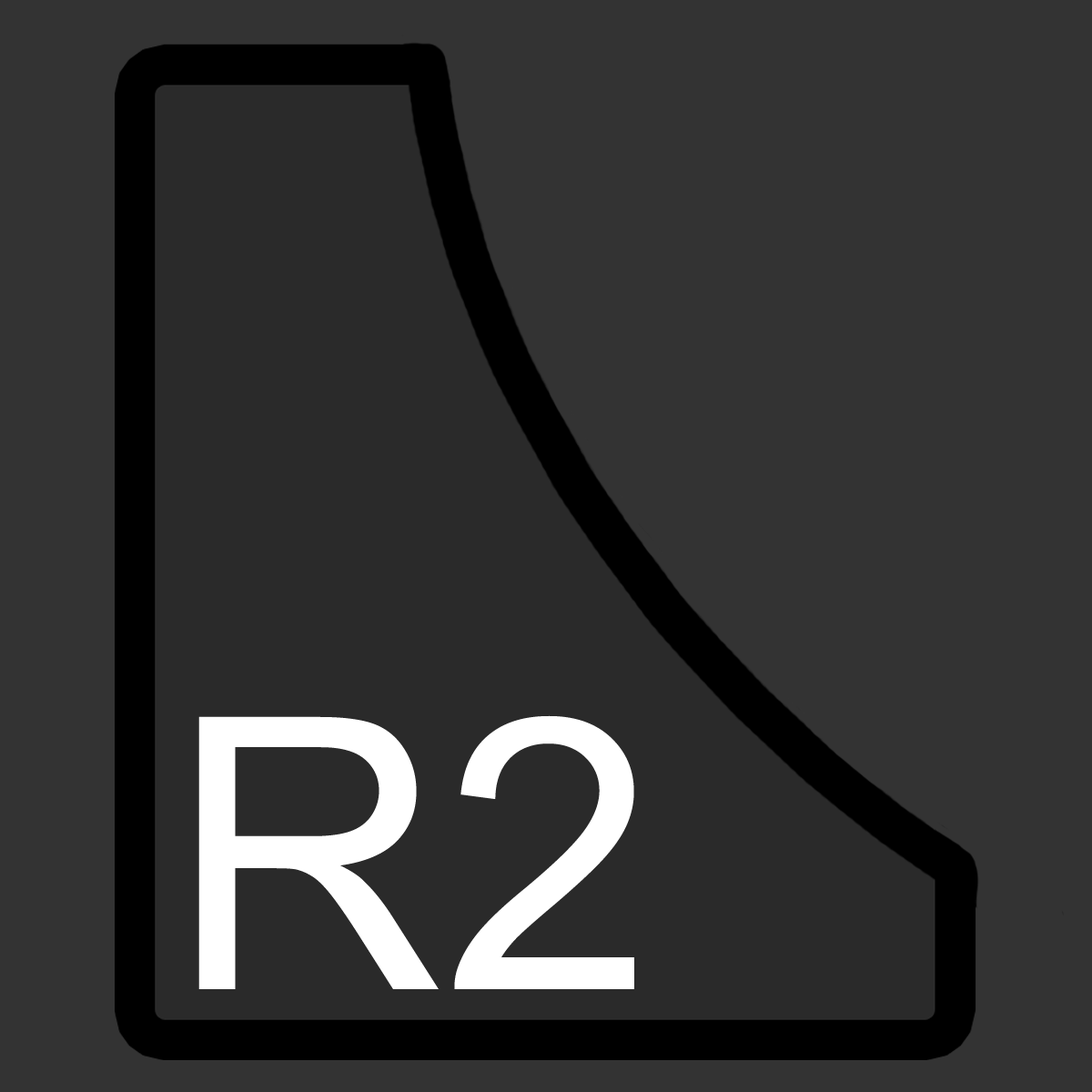
<style>
.page{position:relative;width:1092px;height:1092px;background:#333333}
.page>*{position:absolute;margin:0}
.t1{font:379.2px "ArialMT";color:#ffffff}
</style>
<div class="page">
<p class="t1" style="left:198px;top:715px;width:436px;height:274px">R2</p>
</div>
